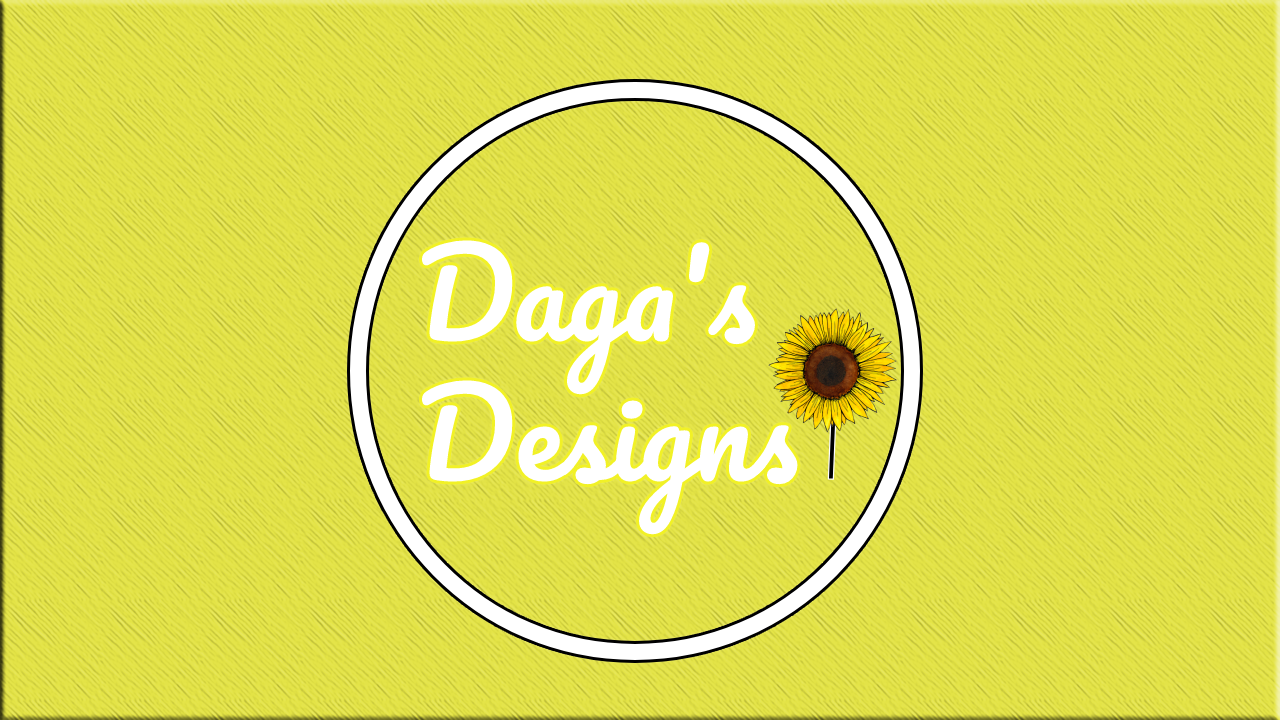
<style>
.page{position:relative;width:1280px;height:720px}
.page>*{position:absolute;margin:0}
.t1{font:117px "Pacifico-Regular";color:#ffffff}
</style>
<div class="page">
<p class="t1" style="left:421px;top:240px;width:377px;height:295px">Daga's <br>Designs</p>
</div>
